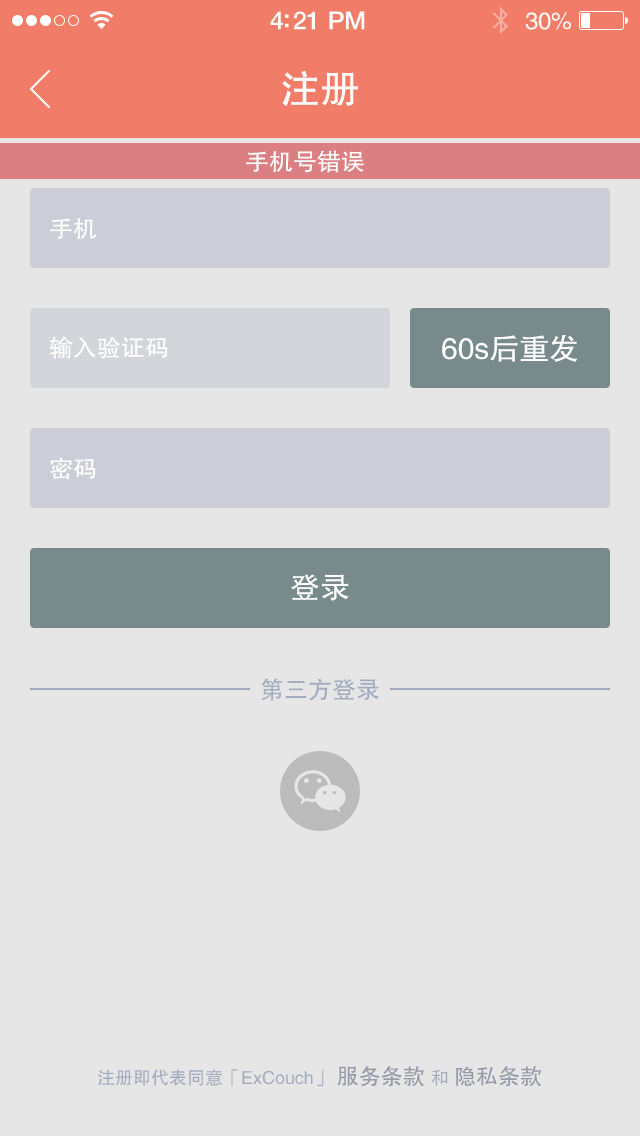
<style>
.page{position:relative;width:640px;height:1136px;background:#e6e6e6}
.page>*{position:absolute;margin:0}
.t1{font:25px "HelveticaNeue-Medium";letter-spacing:-0.02em;color:#ffffff}
.t2{font:24px "FZHTJW--GB1-0";letter-spacing:-0.02em;color:#ffffff}
.t3{font:40px "FZHTJW--GB1-0";color:#ffffff}
.t4{font:24px "FZHTJW--GB1-0";color:#ffffff}
.t5{font:30px "FZHTJW--GB1-0";color:#ffffff}
.t6{font:24px "FZHTJW--GB1-0";color:#a3abbe}
.t7{font:18px "FZHTJW--GB1-0";color:#a3abbe}
.t8{font:22px "FZHTJW--GB1-0";color:#949aa8}
</style>
<div class="page">
<p class="t1" style="left:270px;top:11px;width:95px;height:19px">4:21 PM</p>
<p class="t2" style="left:525px;top:12px;width:46px;height:18px">30%</p>
<p class="t3" style="left:282px;top:71px;width:76px;height:35px">注册</p>
<p class="t4" style="left:246px;top:150px;width:118px;height:23px">手机号错误</p>
<p class="t4" style="left:50px;top:218px;width:47px;height:21px">手机</p>
<p class="t4" style="left:50px;top:336px;width:118px;height:23px">输入验证码</p>
<p class="t5" style="left:442px;top:335px;width:136px;height:27px">60s后重发</p>
<p class="t4" style="left:50px;top:457px;width:46px;height:23px">密码</p>
<p class="t5" style="left:291px;top:574px;width:58px;height:27px">登录</p>
<p class="t6" style="left:261px;top:678px;width:118px;height:23px">第三方登录</p>
<p class="t7" style="left:98px;top:1066px;width:444px;height:21px">注册即代表同意「ExCouch」 <span class="t8">服务条款 </span>和 <span class="t8">隐私条款</span></p>
</div>
